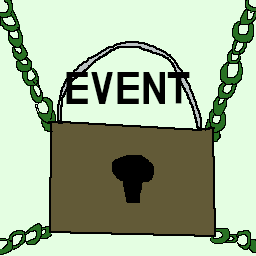
<style>
.page{position:relative;width:256px;height:256px;background:#e4fee2}
.page>*{position:absolute;margin:0}
.t1{font:37px "BMDoHyeon";color:#000000}
</style>
<div class="page">
<p class="t1" style="left:66px;top:72px;width:124px;height:32px">EVENT</p>
</div>
